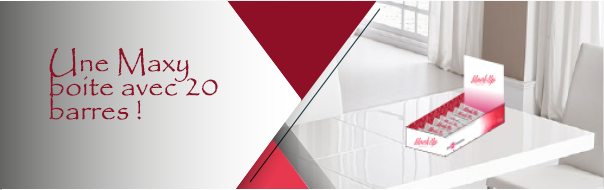
<style>
.page{position:relative;width:604px;height:190px}
.page>*{position:absolute;margin:0}
.t1{font:30px/24px "Papyrus-Regular";color:#8d1026}
</style>
<div class="page">
<p class="t1" style="left:49px;top:47px;width:169px;height:73px">Une Maxy boite avec 20 barres !</p>
</div>
